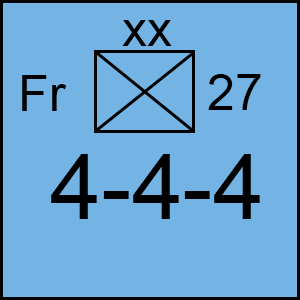
<style>
.page{position:relative;width:300px;height:300px;background:#74b4e4}
.page>*{position:absolute;margin:0}
.t1{font:50px "ArialMT";color:#000000}
.t2{font:91.7px "ArialMT";color:#000000}
</style>
<div class="page">
<p class="t1" style="left:122px;top:20px;width:50px;height:26px">xx</p>
<p class="t1" style="left:22px;top:75px;width:44px;height:36px">Fr</p>
<p class="t1" style="left:208px;top:74px;width:53px;height:36px">27</p>
<p class="t2" style="left:51px;top:154px;width:209px;height:65px">4-4-4</p>
</div>
